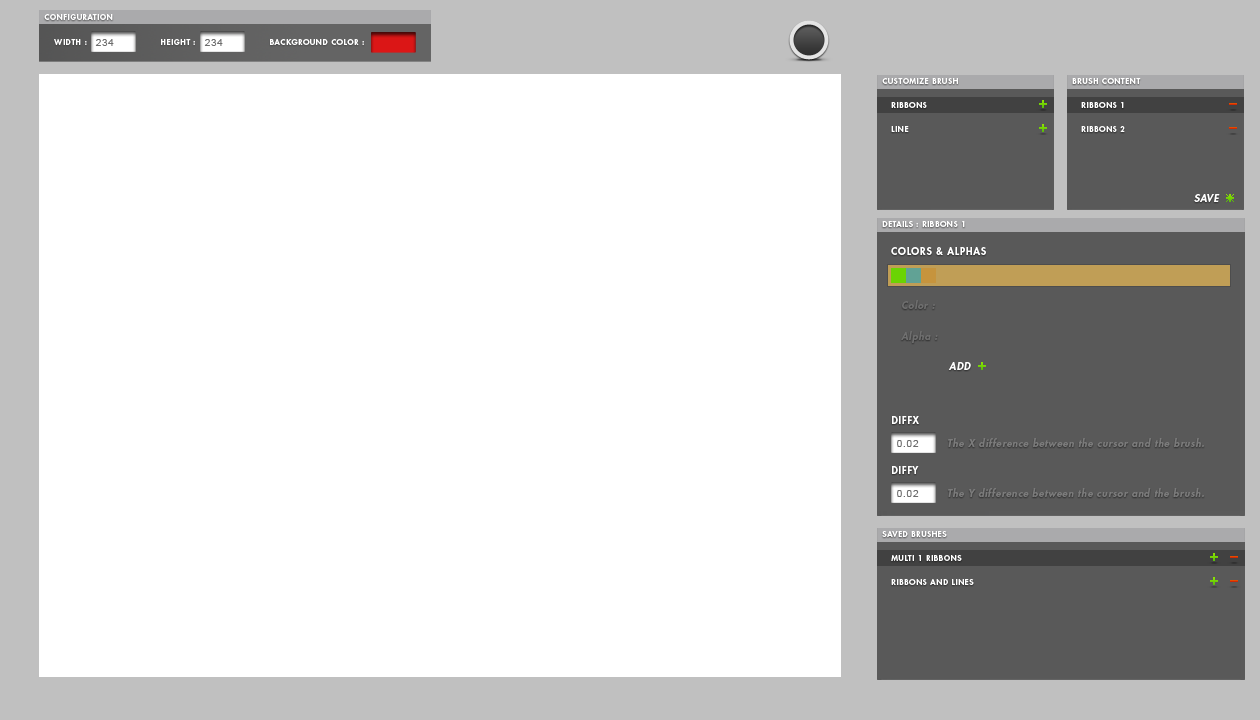
<style>
.page{position:relative;width:1260px;height:720px;background:#ffffff}
.page>*{position:absolute;margin:0}
.t1{font:8px "FuturaStd-Heavy";letter-spacing:0.075em;color:#ffffff}
.t2{font:10px "ArialMT";letter-spacing:0.075em;color:#6d6d6d}
.t3{font:10px "FuturaStd-HeavyOblique";letter-spacing:0.075em;color:#ffffff}
.t4{font:10px "FuturaStd-Heavy";letter-spacing:0.075em;color:#ffffff}
.t5{font:10px "FuturaStd-HeavyOblique";letter-spacing:0.075em;color:#6f6f6f}
.t6{font:10px "FuturaStd-HeavyOblique";letter-spacing:0.075em;color:#7b7b7b}
</style>
<div class="page">
<p class="t1" style="left:44px;top:14px;width:69px;height:6px">CONFIGURATION</p>
<p class="t1" style="left:54px;top:39px;width:33px;height:6px">WIDTH :</p>
<p class="t2" style="left:95px;top:39px;width:19px;height:7px">234</p>
<p class="t1" style="left:161px;top:39px;width:34px;height:6px">HEIGHT :</p>
<p class="t2" style="left:204px;top:39px;width:19px;height:7px">234</p>
<p class="t1" style="left:270px;top:39px;width:94px;height:6px">BACKGROUND COLOR :</p>
<p class="t1" style="left:882px;top:78px;width:76px;height:6px">CUSTOMIZE BRUSH</p>
<p class="t1" style="left:1072px;top:78px;width:69px;height:6px">BRUSH CONTENT</p>
<p class="t1" style="left:891px;top:102px;width:36px;height:6px">RIBBONS</p>
<p class="t1" style="left:1081px;top:102px;width:43px;height:6px">RIBBONS 1</p>
<p class="t1" style="left:891px;top:126px;width:18px;height:6px">LINE</p>
<p class="t1" style="left:1081px;top:126px;width:44px;height:6px">RIBBONS 2</p>
<p class="t3" style="left:1194px;top:194px;width:26px;height:8px">SAVE</p>
<p class="t1" style="left:882px;top:221px;width:83px;height:6px">DETAILS : RIBBONS 1</p>
<p class="t4" style="left:891px;top:247px;width:95px;height:8px">COLORS &amp; ALPHAS</p>
<p class="t5" style="left:902px;top:300px;width:33px;height:9px">Color :</p>
<p class="t5" style="left:901px;top:331px;width:37px;height:12px">Alpha :</p>
<p class="t3" style="left:948px;top:362px;width:23px;height:8px">ADD</p>
<p class="t4" style="left:892px;top:416px;width:27px;height:8px">DIFFX</p>
<p class="t6" style="left:948px;top:438px;width:256px;height:9px">The X difference between the cursor and the brush.</p>
<p class="t2" style="left:897px;top:440px;width:22px;height:7px">0.02</p>
<p class="t4" style="left:892px;top:466px;width:27px;height:8px">DIFFY</p>
<p class="t2" style="left:897px;top:490px;width:22px;height:7px">0.02</p>
<p class="t6" style="left:948px;top:488px;width:256px;height:9px">The Y difference between the cursor and the brush.</p>
<p class="t1" style="left:882px;top:531px;width:65px;height:6px">SAVED BRUSHES</p>
<p class="t1" style="left:891px;top:555px;width:71px;height:6px">MULTI 1 RIBBONS</p>
<p class="t1" style="left:891px;top:579px;width:83px;height:6px">RIBBONS AND LINES</p>
</div>
